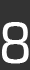
<style>
.page{position:relative;width:30px;height:70px;background:#333333}
.page>*{position:absolute;margin:0}
.t1{font:57px "Exo2-Regular";color:#ffffff}
</style>
<div class="page">
<p class="t1" style="left:1px;top:22px;width:28px;height:42px">8</p>
</div>
